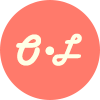
<style>
.page{position:relative;width:100px;height:100px;background:#ff7a6b}
.page>*{position:absolute;margin:0}
.t1{font:38px "HarlowSolid";letter-spacing:-0.08em;color:#ffffe5}
.t2{font:30px "HarlowSolid";letter-spacing:-0.08em;color:#ffffe5}
.t3{font:86px "BellMT";letter-spacing:-0.08em;color:#ffffe5}
</style>
<div class="page">
<p class="t1" style="left:16px;top:34px;width:25px;height:32px">O</p>
<p class="t2" style="left:52px;top:33px;width:30px;height:33px">L</p>
<p class="t3" style="left:45px;top:46px;width:9px;height:9px">.</p>
</div>
